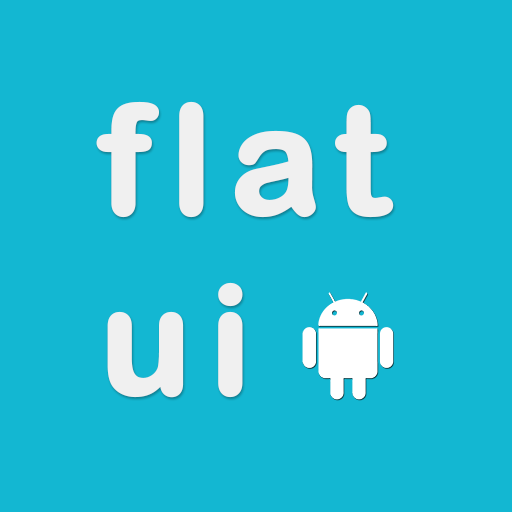
<style>
.page{position:relative;width:512px;height:512px;background:#13b7d2}
.page>*{position:absolute;margin:0}
.t1{font:150px "ArialRoundedMTBold";letter-spacing:0.1em;color:#f0f0f0;font-weight:bold}
</style>
<div class="page">
<p class="t1" style="left:96px;top:101px;width:298px;height:297px">flat<br>ui</p>
</div>
